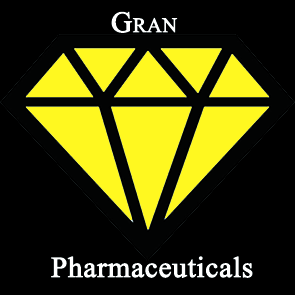
<style>
.page{position:relative;width:295px;height:295px;background:#000000}
.page>*{position:absolute;margin:0}
.t1{font:29.2px "MongolianBaiti";color:#ffffff;font-variant:small-caps;font-weight:bold}
.t2{font:29.2px "MongolianBaiti";color:#ffffff;font-weight:bold}
</style>
<div class="page">
<p class="t1" style="left:111px;top:11px;width:67px;height:22px">Gran</p>
<p class="t2" style="left:51px;top:256px;width:202px;height:22px">Pharmaceuticals</p>
</div>
